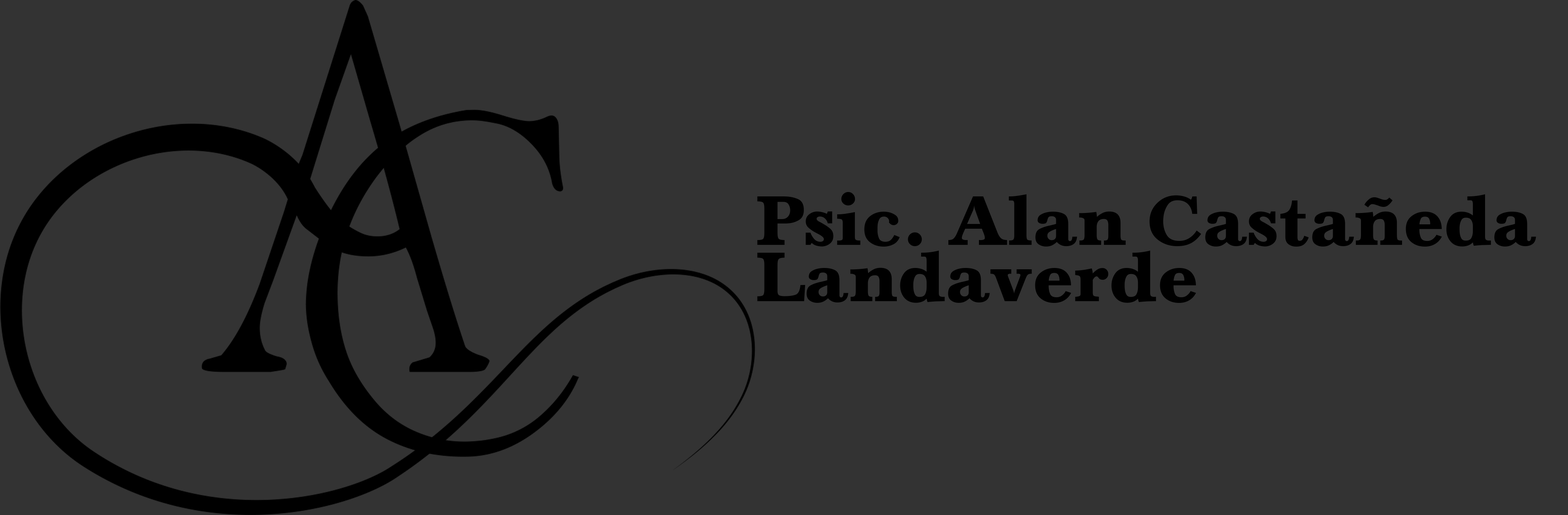
<style>
.page{position:relative;width:1568px;height:515px;background:#333333}
.page>*{position:absolute;margin:0}
.t1{font:72.8px/56.5px "Baskerville";color:#000000}
</style>
<div class="page">
<p class="t1" style="left:757px;top:192px;width:779px;height:111px">Psic. Alan Castañeda <br>Landaverde</p>
</div>
